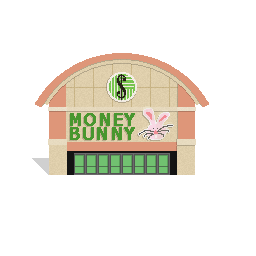
<style>
.page{position:relative;width:256px;height:256px;background:#ffffff}
.page>*{position:absolute;margin:0}
.t1{font:16.7px/13.9px "MSReferenceSansSerif";letter-spacing:0.025em;color:#48972f;font-weight:bold}
.t2{font:16.7px/13.9px "MSReferenceSansSerif";letter-spacing:0.025em;font-weight:bold}
</style>
<div class="page">
<p class="t1" style="left:70px;top:113px;width:65px;height:27px;text-align:center">MONEY<br>BUNNY</p>
<p class="t2" style="left:69px;top:114px;width:65px;height:27px;text-align:center">MONEY<br>BUNNY</p>
</div>
